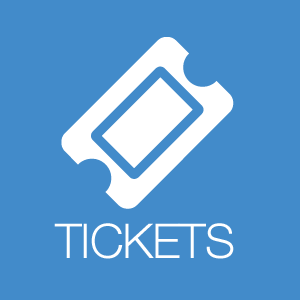
<style>
.page{position:relative;width:300px;height:300px;background:#428bca}
.page>*{position:absolute;margin:0}
.t1{font:48px "HelveticaNeueLight";letter-spacing:-0.025em;color:#ffffff}
</style>
<div class="page">
<p class="t1" style="left:54px;top:223px;width:180px;height:36px">TICKETS</p>
</div>
